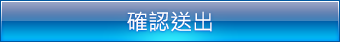
<style>
.page{position:relative;width:340px;height:42px}
.page>*{position:absolute;margin:0}
.t1{font:22px "MicrosoftJhengHeiRegular";color:#ffffff}
</style>
<div class="page">
<p class="t1" style="left:127px;top:11px;width:85px;height:21px">確認送出</p>
</div>
